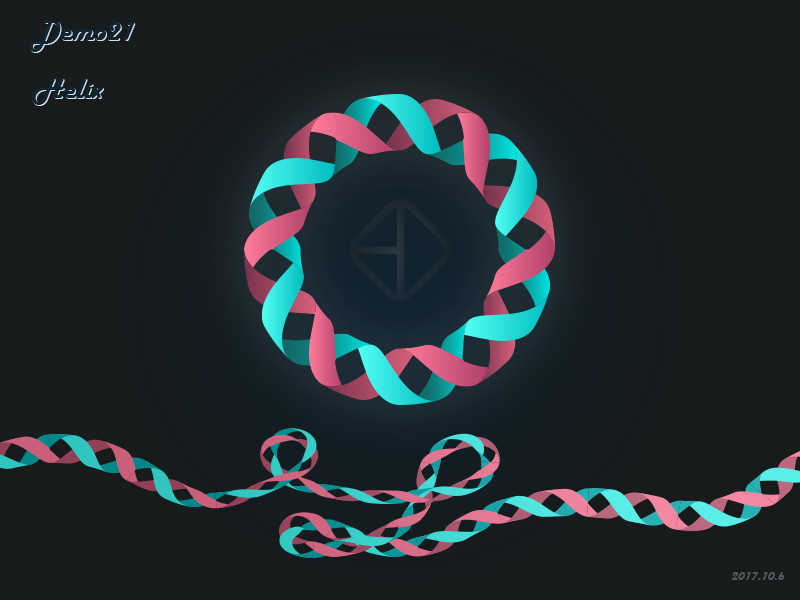
<style>
.page{position:relative;width:800px;height:600px;background:#171b1b}
.page>*{position:absolute;margin:0}
.t1{font:30px/58.2px "HarlowSolid"}
.t2{font:14px "HarlowSolid";color:#52585a}
</style>
<div class="page">
<p class="t1" style="left:30px;top:21px;width:106px;height:85px">Demo21<br>Helix</p>
<p class="t2" style="left:731px;top:572px;width:54px;height:8px">2017.10.6</p>
</div>
